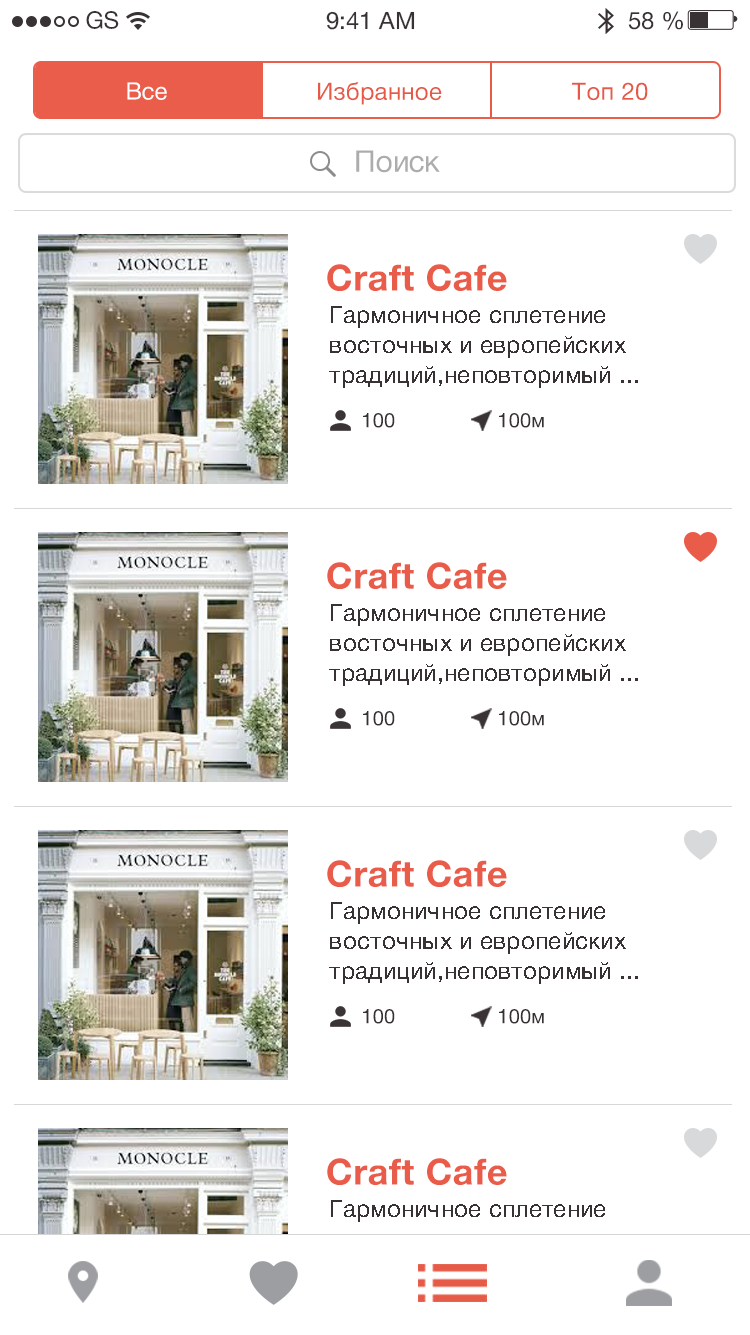
<style>
.page{position:relative;width:750px;height:1335px;background:#ffffff}
.page>*{position:absolute;margin:0}
.t1{font:24px "HelveticaNeueCyr-Roman";color:#383234}
.t2{font:24px "HelveticaNeueCyr-Roman";color:#ffffff}
.t3{font:24px "HelveticaNeueCyr-Roman";letter-spacing:0.016em;color:#e65947}
.t4{font:30px "HelveticaNeueCyr-Roman";letter-spacing:-0.016em;color:#acacac}
.t5{font:36px "HelveticaNeueCyr-Bold";letter-spacing:0.012em;color:#e95c4a}
.t6{font:24px/30px "HelveticaNeueCyr-Roman";letter-spacing:0.012em;color:#383234}
.t7{font:20px "HelveticaNeueCyr-Roman";letter-spacing:0.016em;color:#373133}
.t8{font:24px/30px "HelveticaNeueCyr-Roman";letter-spacing:0.012em}
</style>
<div class="page">
<p class="t1" style="left:86px;top:11px;width:33px;height:18px">GS</p>
<p class="t1" style="left:326px;top:11px;width:89px;height:19px">9:41 AM</p>
<p class="t1" style="left:628px;top:11px;width:55px;height:19px">58 %</p>
<p class="t2" style="left:127px;top:82px;width:40px;height:18px">Все</p>
<p class="t3" style="left:318px;top:82px;width:124px;height:23px">Избранное</p>
<p class="t3" style="left:572px;top:82px;width:76px;height:19px">Топ 20</p>
<p class="t4" style="left:356px;top:150px;width:84px;height:23px">Поиск</p>
<p class="t5" style="left:327px;top:264px;width:180px;height:27px">Craft Cafe</p>
<p class="t6" style="left:329px;top:306px;width:309px;height:82px">Гармоничное сплетение восточных и европейских традиций,неповторимый ...</p>
<p class="t7" style="left:363px;top:413px;width:32px;height:15px">100</p>
<p class="t7" style="left:499px;top:413px;width:45px;height:15px">100м</p>
<p class="t5" style="left:327px;top:562px;width:180px;height:27px">Craft Cafe</p>
<p class="t6" style="left:329px;top:604px;width:309px;height:82px">Гармоничное сплетение восточных и европейских традиций,неповторимый ...</p>
<p class="t7" style="left:363px;top:711px;width:32px;height:15px">100</p>
<p class="t7" style="left:499px;top:711px;width:45px;height:15px">100м</p>
<p class="t5" style="left:327px;top:860px;width:180px;height:27px">Craft Cafe</p>
<p class="t6" style="left:329px;top:902px;width:309px;height:82px">Гармоничное сплетение восточных и европейских традиций,неповторимый ...</p>
<p class="t7" style="left:363px;top:1009px;width:32px;height:15px">100</p>
<p class="t7" style="left:499px;top:1009px;width:45px;height:15px">100м</p>
<p class="t5" style="left:327px;top:1158px;width:180px;height:27px">Craft Cafe</p>
<p class="t8" style="left:329px;top:1200px;width:309px;height:112px">Гармоничное сплетение <br><br>восточных и европейских традиций,неповторимый ...</p>
</div>
